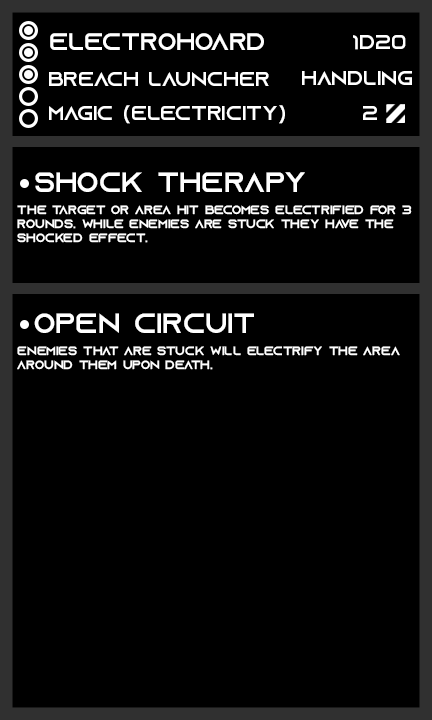
<style>
.page{position:relative;width:432px;height:720px;background:#000000}
.page>*{position:absolute;margin:0}
.t1{font:24px "AzonixRegular";color:#ffffff}
.t2{font:20px "AzonixRegular";color:#ffffff}
.t3{font:28px "AzonixRegular";color:#ffffff}
.t4{font:12px "AzonixRegular";color:#ffffff}
</style>
<div class="page">
<p class="t1" style="left:50px;top:33px;width:214px;height:17px">electrohoard</p>
<p class="t2" style="left:353px;top:35px;width:53px;height:15px">1d20</p>
<p class="t2" style="left:49px;top:72px;width:220px;height:14px">breach launcher</p>
<p class="t2" style="left:302px;top:71px;width:110px;height:14px">handling</p>
<p class="t2" style="left:49px;top:105px;width:236px;height:19px">magic (electricity)</p>
<p class="t2" style="left:363px;top:106px;width:14px;height:14px">2</p>
<p class="t3" style="left:35px;top:172px;width:270px;height:20px">shock therapy</p>
<p class="t4" style="left:17px;top:205px;width:395px;height:38px">the target or area hit becomes electrified for 3<br>rounds. while enemies are stuck they have the<br>shocked effect.</p>
<p class="t3" style="left:34px;top:313px;width:220px;height:20px">open circuit</p>
<p class="t4" style="left:17px;top:346px;width:383px;height:24px">enemies that are stuck will electrify the area<br>around them upon death.</p>
</div>
